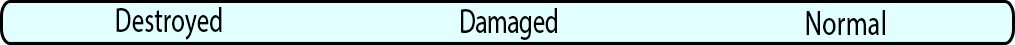
<style>
.page{position:relative;width:1015px;height:45px;background:#e2ffff}
.page>*{position:absolute;margin:0}
.t1{font:34.8px "MyriadHebrew-Regular";color:#000000;scale:0.73 1}
.t2{font:35.2px "MyriadHebrew-Regular";color:#000000;scale:0.69 1}
.t3{font:34.6px "MyriadHebrew-Regular";color:#000000;scale:0.77 1}
</style>
<div class="page">
<p class="t1" style="left:116px;top:7px;width:106px;height:33px">Destroyed</p>
<p class="t2" style="left:461px;top:8px;width:97px;height:32px">Damaged</p>
<p class="t3" style="left:806px;top:10px;width:79px;height:25px">Normal</p>
</div>
